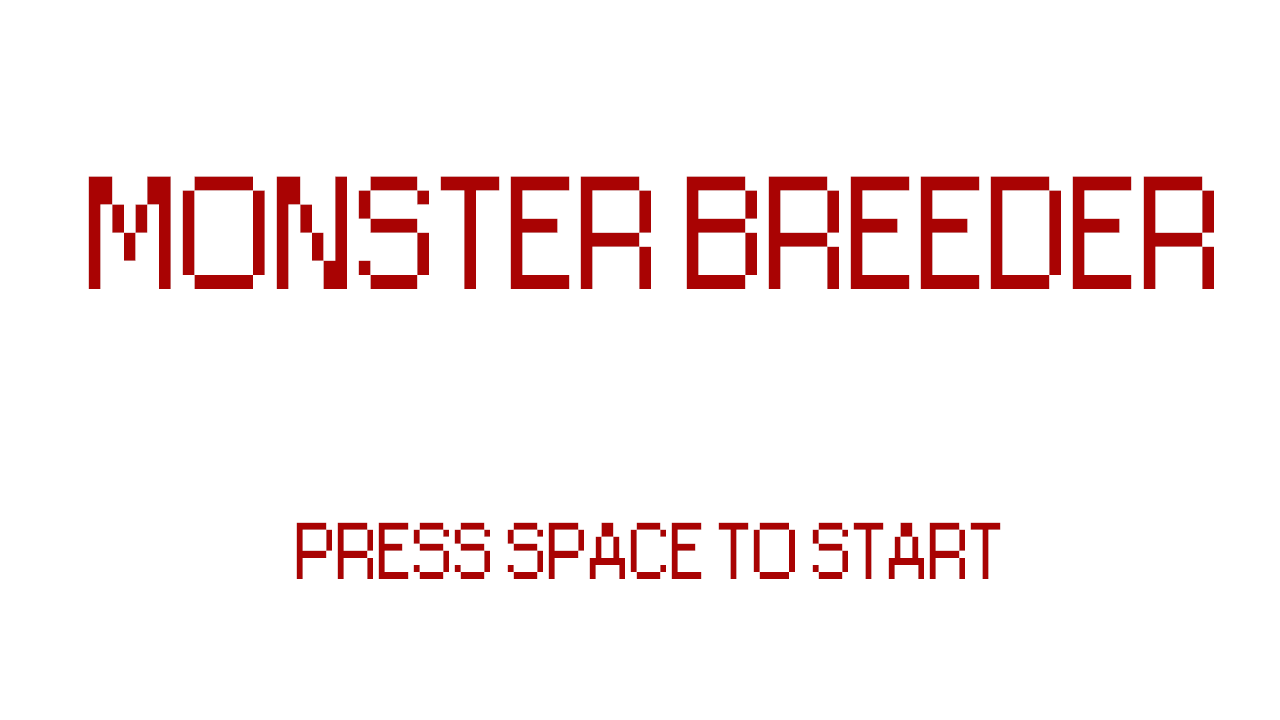
<style>
.page{position:relative;width:1280px;height:720px;background:#ffffff}
.page>*{position:absolute;margin:0}
.t1{font:150px "Small Fonts";color:#a90303}
.t2{font:75px "Small Fonts";color:#a90303}
</style>
<div class="page">
<p class="t1" style="left:88px;top:176px;width:1126px;height:113px">MONSTER BREEDER</p>
<p class="t2" style="left:296px;top:522px;width:705px;height:57px">PRESS SPACE TO START</p>
</div>
